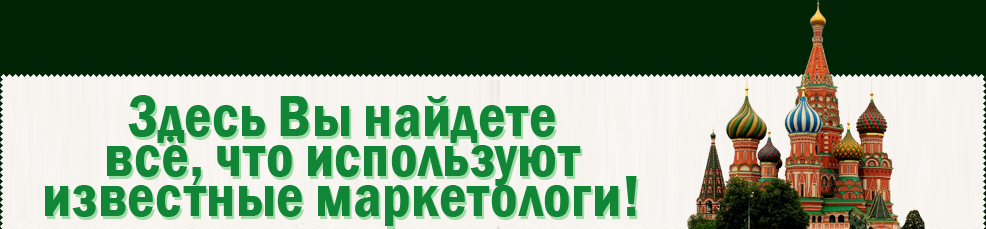
<style>
.page{position:relative;width:986px;height:229px;background:#002305}
.page>*{position:absolute;margin:0}
.t1{font:60px/40px "FranklinGothic-DemiCond";color:#118637}
</style>
<div class="page">
<p class="t1" style="left:45px;top:95px;width:592px;height:131px;text-align:center">Здесь Вы найдете всё, что используют известные маркетологи!</p>
</div>
